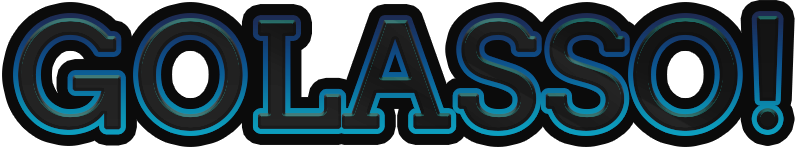
<style>
.page{position:relative;width:795px;height:148px;background:#0b0b0b}
.page>*{position:absolute;margin:0}
.t1{font:142px "Arvo";color:#1d1d1d;text-transform:uppercase;font-weight:bold}
</style>
<div class="page">
<p class="t1" style="left:18px;top:16px;width:761px;height:115px">GOLASSO!</p>
</div>
